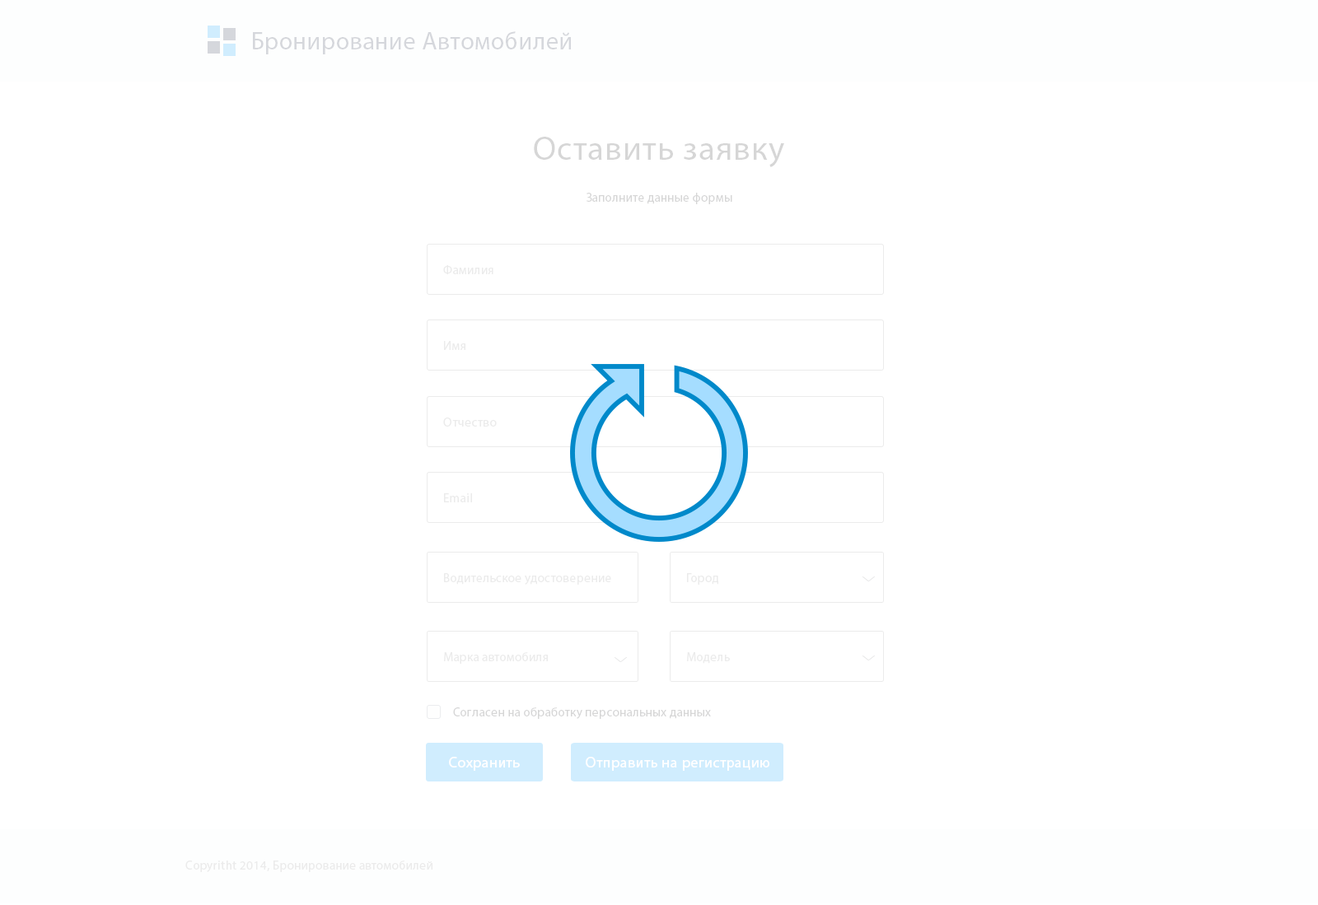
<style>
.page{position:relative;width:1318px;height:905px;background:#ffffff}
.page>*{position:absolute;margin:0}
.t1{font:24.7px "MyriadPro-Regular";letter-spacing:0.025em;color:#d5d7dc}
.t2{font:33.8px "MyriadPro-Regular";letter-spacing:0.025em;color:#d6d6d6}
.t3{font:12.4px "MyriadPro-Regular";letter-spacing:0.025em;color:#d6d6d6}
.t4{font:12.4px "MyriadPro-Regular";letter-spacing:0.025em;color:#ebebeb}
.t5{font:14.8px "MyriadPro-Regular";letter-spacing:0.025em;color:#ffffff}
</style>
<div class="page">
<p class="t1" style="left:253px;top:31px;width:318px;height:23px">Бронирование Автомобилей</p>
<p class="t2" style="left:534px;top:137px;width:250px;height:30px">Оставить заявку</p>
<p class="t3" style="left:586px;top:193px;width:146px;height:11px">Заполните данные формы</p>
<p class="t4" style="left:443px;top:265px;width:50px;height:10px">Фамилия</p>
<p class="t4" style="left:444px;top:341px;width:21px;height:9px">Имя</p>
<p class="t4" style="left:443px;top:418px;width:54px;height:9px">Отчество</p>
<p class="t4" style="left:444px;top:493px;width:28px;height:9px">Email</p>
<p class="t4" style="left:444px;top:573px;width:167px;height:12px">Водительское удостоверение</p>
<p class="t4" style="left:687px;top:573px;width:31px;height:12px">Город</p>
<p class="t4" style="left:444px;top:652px;width:104px;height:12px">Марка автомобиля</p>
<p class="t4" style="left:687px;top:652px;width:43px;height:12px">Модель</p>
<p class="t3" style="left:453px;top:707px;width:258px;height:12px">Согласен на обработку персональных данных</p>
<p class="t5" style="left:449px;top:757px;width:71px;height:14px">Сохранить</p>
<p class="t5" style="left:586px;top:757px;width:183px;height:14px">Отправить на регистрацию</p>
<p class="t4" style="left:185px;top:861px;width:247px;height:11px">Copyritht 2014, Бронирование автомобилей</p>
</div>
